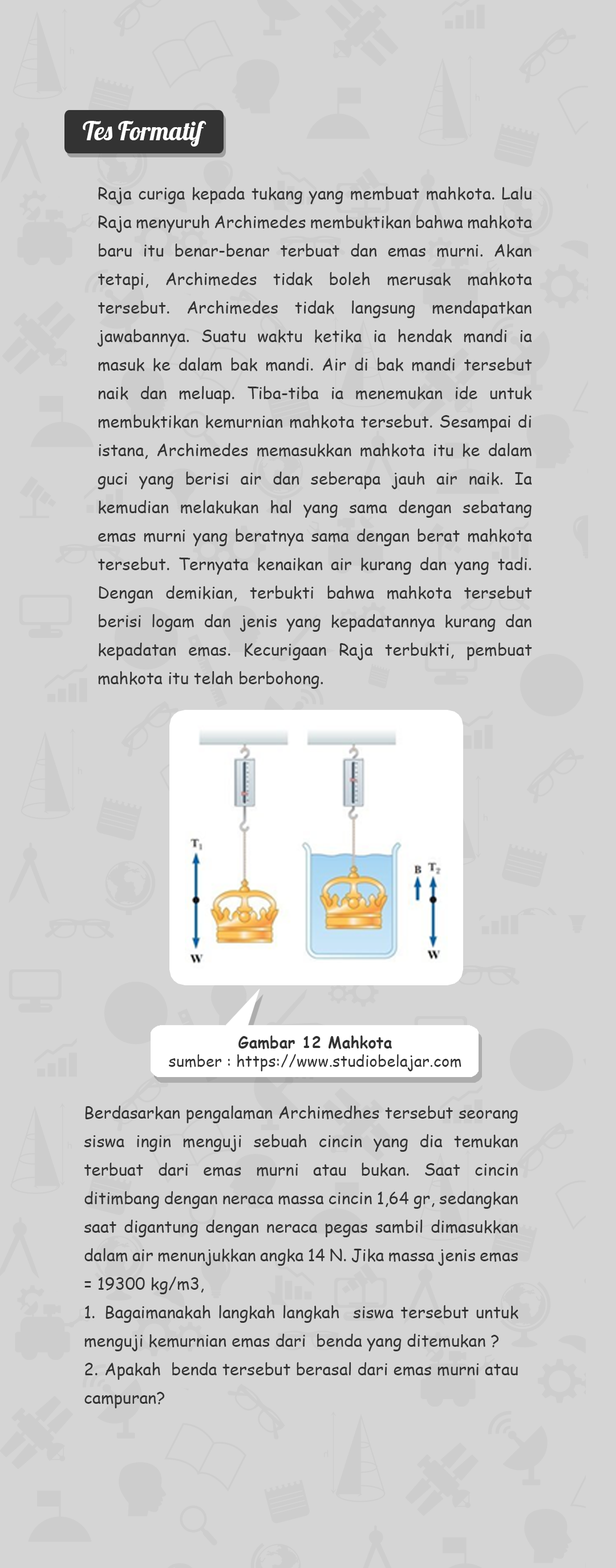
<style>
.page{position:relative;width:616px;height:1568px;background:#d5d5d5}
.page>*{position:absolute;margin:0}
.t1{font:25.3px "Lobster-Regular";color:#ffffff}
.t2{font:16.6px/28.5px "ComicSansMS";color:#333333}
.t3{font:15.9px/19.1px "ComicSansMS";color:#333333}
.t4{font:15.9px/19.1px "ComicSansMS-Bold";color:#333333}
</style>
<div class="page">
<p class="t1" style="left:83px;top:121px;width:123px;height:26px">Tes Formatif</p>
<p class="t2" style="left:97px;top:186px;width:435px;height:503px;text-align:justify">Raja curiga kepada tukang yang membuat mahkota. Lalu Raja menyuruh Archimedes membuktikan bahwa mahkota baru itu benar-benar terbuat dan emas murni. Akan tetapi, Archimedes tidak boleh merusak mahkota tersebut. Archimedes tidak langsung mendapatkan jawabannya. Suatu waktu ketika ia hendak mandi ia masuk ke dalam bak mandi. Air di bak mandi tersebut naik dan meluap. Tiba-tiba ia menemukan ide untuk membuktikan kemurnian mahkota tersebut. Sesampai di istana, Archimedes memasukkan mahkota itu ke dalam guci yang berisi air dan seberapa jauh air naik. Ia kemudian melakukan hal yang sama dengan sebatang emas murni yang beratnya sama dengan berat mahkota tersebut. Ternyata kenaikan air kurang dan yang tadi. Dengan demikian, terbukti bahwa mahkota tersebut berisi logam dan jenis yang kepadatannya kurang dan kepadatan emas. Kecurigaan Raja terbukti, pembuat mahkota itu telah berbohong.</p>
<p class="t3" style="left:169px;top:1035px;width:292px;height:36px;text-align:center"><span class="t4">Gambar 12 Mahkota</span><br>sumber : https://www.studiobelajar.com</p>
<p class="t2" style="left:84px;top:1106px;width:434px;height:302px;text-align:justify">Berdasarkan pengalaman Archimedhes tersebut seorang siswa ingin menguji sebuah cincin yang dia temukan terbuat dari emas murni atau bukan. Saat cincin ditimbang dengan neraca massa cincin 1,64 gr, sedangkan saat digantung dengan neraca pegas sambil dimasukkan dalam air menunjukkan angka 14 N. Jika massa jenis emas = 19300 kg/m3, <br>1. Bagaimanakah langkah langkah  siswa tersebut untuk menguji kemurnian emas dari  benda yang ditemukan ?<br>2. Apakah  benda tersebut berasal dari emas murni atau campuran?</p>
</div>
